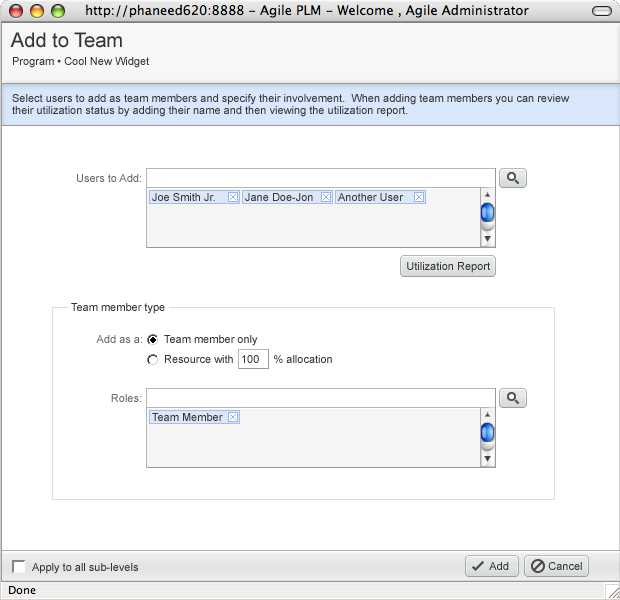
<style>
.page{position:relative;width:620px;height:600px;background:#ffffff}
.page>*{position:absolute;margin:0}
.t1{font:20px "ArialMT";color:#333333}
.t2{font:11px "ArialMT";color:#333333}
.t3{font:11px/12px "ArialMT";color:#333333}
.t4{font:11px "ArialMT";color:#666666}
</style>
<div class="page">
<p class="t1" style="left:10px;top:32px;width:112px;height:16px">Add to Team</p>
<p class="t2" style="left:13px;top:57px;width:136px;height:11px">Program • Cool New Widget</p>
<p class="t3" style="left:12px;top:94px;width:558px;height:23px">Select users to add as team members and specify their involvement.  When adding team members you can review<br>their utilization status by adding their name and then viewing the utilization report.</p>
<p class="t4" style="left:77px;top:174px;width:64px;height:8px">Users to Add:</p>
<p class="t2" style="left:152px;top:193px;width:63px;height:8px">Joe Smith Jr.</p>
<p class="t2" style="left:245px;top:193px;width:68px;height:8px">Jane Doe-Jon</p>
<p class="t2" style="left:338px;top:193px;width:66px;height:8px">Another User</p>
<p class="t2" style="left:407px;top:262px;width:83px;height:11px">Utilization Report</p>
<p class="t2" style="left:71px;top:303px;width:94px;height:11px">Team member type</p>
<p class="t4" style="left:96px;top:335px;width:46px;height:8px">Add as a:</p>
<p class="t2" style="left:164px;top:335px;width:94px;height:11px">Team member only</p>
<p class="t2" style="left:165px;top:355px;width:167px;height:8px">Resource with             % allocation</p>
<p class="t2" style="left:242px;top:355px;width:17px;height:8px">100</p>
<p class="t4" style="left:111px;top:394px;width:30px;height:8px">Roles:</p>
<p class="t2" style="left:152px;top:413px;width:71px;height:8px">Team Member</p>
<p class="t2" style="left:32px;top:563px;width:106px;height:11px">Apply to all sub-levels</p>
<p class="t2" style="left:489px;top:562px;width:20px;height:8px">Add</p>
<p class="t2" style="left:548px;top:562px;width:34px;height:8px">Cancel</p>
</div>
